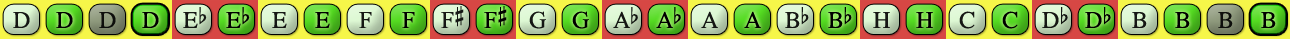
<style>
.page{position:relative;width:1290px;height:39px}
.page>*{position:absolute;margin:0}
.t1{font:24px "OpusChords";color:#000000}
.t2{font:24px "OpusChords";letter-spacing:-0.05em;color:#000000}
</style>
<div class="page">
<p class="t1" style="left:441px;top:6px;width:23px;height:22px;opacity:0.9">F#</p>
<p class="t1" style="left:484px;top:6px;width:23px;height:22px">F#</p>
<p class="t1" style="left:13px;top:12px;width:17px;height:16px;opacity:0.9">D</p>
<p class="t1" style="left:56px;top:12px;width:17px;height:16px">D</p>
<p class="t1" style="left:99px;top:12px;width:17px;height:16px;opacity:0.9">D</p>
<p class="t1" style="left:142px;top:12px;width:17px;height:16px">D</p>
<p class="t1" style="left:183px;top:7px;width:24px;height:21px;opacity:0.9">Eb</p>
<p class="t1" style="left:226px;top:7px;width:24px;height:21px">Eb</p>
<p class="t1" style="left:272px;top:12px;width:15px;height:16px;opacity:0.9">E</p>
<p class="t1" style="left:315px;top:12px;width:15px;height:16px">E</p>
<p class="t1" style="left:359px;top:12px;width:13px;height:16px;opacity:0.9">F</p>
<p class="t1" style="left:402px;top:12px;width:13px;height:16px">F</p>
<p class="t1" style="left:529px;top:11px;width:17px;height:18px;opacity:0.9">G</p>
<p class="t1" style="left:572px;top:11px;width:17px;height:18px">G</p>
<p class="t2" style="left:613px;top:7px;width:25px;height:21px;opacity:0.9">Ab</p>
<p class="t2" style="left:656px;top:7px;width:25px;height:21px">Ab</p>
<p class="t1" style="left:701px;top:11px;width:17px;height:17px;opacity:0.9">A</p>
<p class="t1" style="left:744px;top:11px;width:17px;height:17px">A</p>
<p class="t1" style="left:785px;top:7px;width:24px;height:21px;opacity:0.9">Bb</p>
<p class="t1" style="left:828px;top:7px;width:24px;height:21px">Bb</p>
<p class="t1" style="left:873px;top:12px;width:17px;height:16px;opacity:0.9">H</p>
<p class="t1" style="left:916px;top:12px;width:17px;height:16px">H</p>
<p class="t1" style="left:959px;top:11px;width:16px;height:18px;opacity:0.9">C</p>
<p class="t1" style="left:1002px;top:11px;width:16px;height:18px">C</p>
<p class="t1" style="left:1042px;top:7px;width:26px;height:21px;opacity:0.9">Db</p>
<p class="t1" style="left:1085px;top:7px;width:26px;height:21px">Db</p>
<p class="t1" style="left:1132px;top:12px;width:15px;height:16px;opacity:0.9">B</p>
<p class="t1" style="left:1175px;top:12px;width:15px;height:16px">B</p>
<p class="t1" style="left:1218px;top:12px;width:15px;height:16px;opacity:0.9">B</p>
<p class="t1" style="left:1261px;top:12px;width:15px;height:16px">B</p>
</div>
